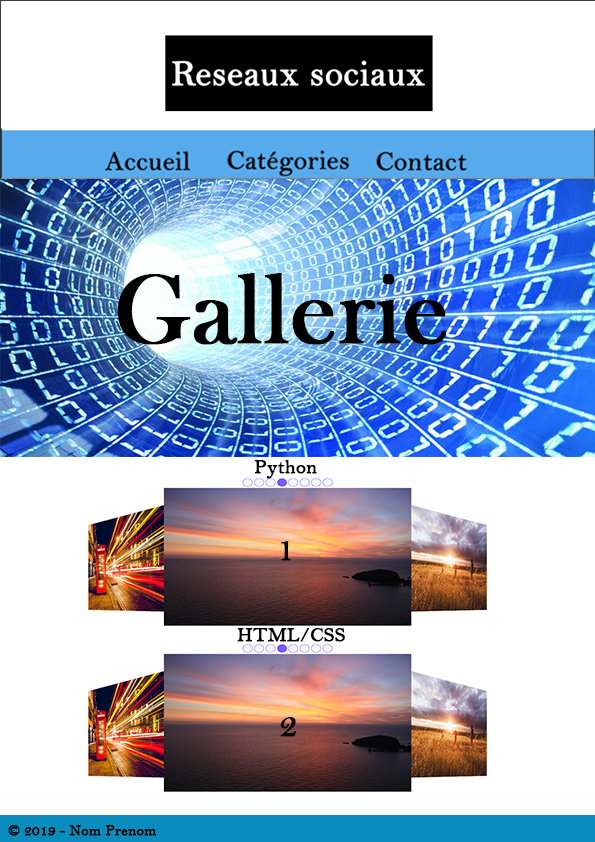
<style>
.page{position:relative;width:595px;height:842px;background:#ffffff}
.page>*{position:absolute;margin:0}
.t1{font:100px "BaskOldFace";color:#000000;font-weight:bold}
.t2{font:20px "BellMT";color:#000000;font-weight:bold}
.t3{font:36px "BellMT";color:#000000;font-weight:bold}
.t4{font:15px "BellMT";color:#000000;font-weight:bold}
</style>
<div class="page">
<p class="t1" style="left:117px;top:273px;width:330px;height:72px">Gallerie</p>
<p class="t2" style="left:254px;top:460px;width:63px;height:19px">Python</p>
<p class="t3" style="left:281px;top:541px;width:10px;height:20px">1</p>
<p class="t2" style="left:237px;top:628px;width:108px;height:14px">HTML/CSS</p>
<p class="t3" style="left:280px;top:717px;width:17px;height:20px">2</p>
<p class="t4" style="left:8px;top:825px;width:149px;height:11px">© 2019 - Nom Prenom</p>
</div>
